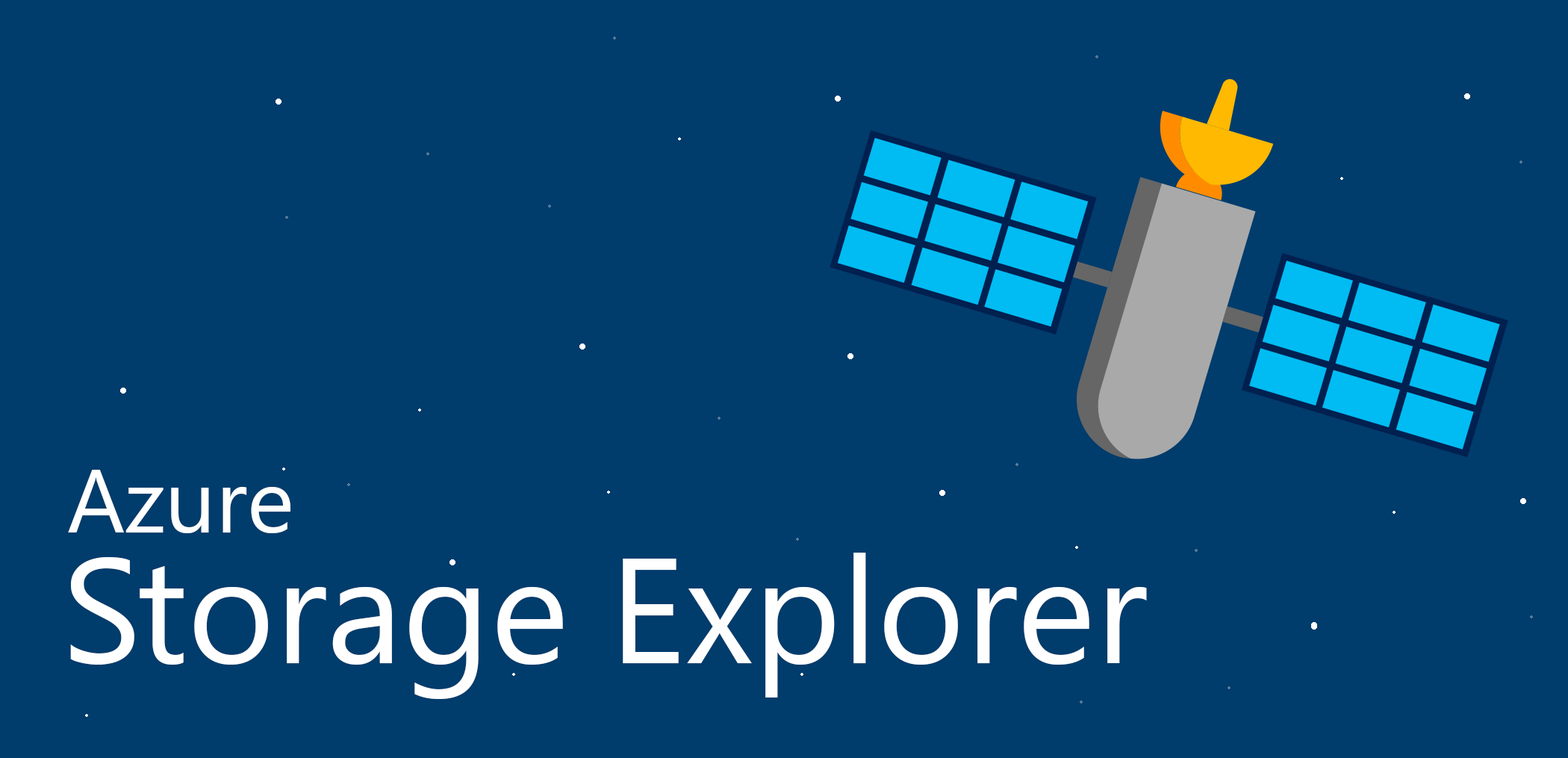
<style>
.page{position:relative;width:1568px;height:758px;background:#003c6c}
.page>*{position:absolute;margin:0}
.t1{font:89.6px "SegoeUI";color:#ffffff}
.t2{font:149.3px "SegoeUI";color:#ffffff}
.t3{font:53.8px "SegoeUI";color:#ffffff}
</style>
<div class="page">
<p class="t1" style="left:68px;top:470px;width:222px;height:63px">Azure</p>
<p class="t2" style="left:70px;top:553px;width:1077px;height:146px"><span class="t3"><br></span>Storage Explorer</p>
</div>
